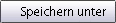
<style>
.page{position:relative;width:116px;height:23px}
.page>*{position:absolute;margin:0}
.t1{font:13px "Myriad-Roman";color:#000000}
</style>
<div class="page">
<p class="t1" style="left:21px;top:6px;width:85px;height:13px">Speichern unter</p>
</div>
